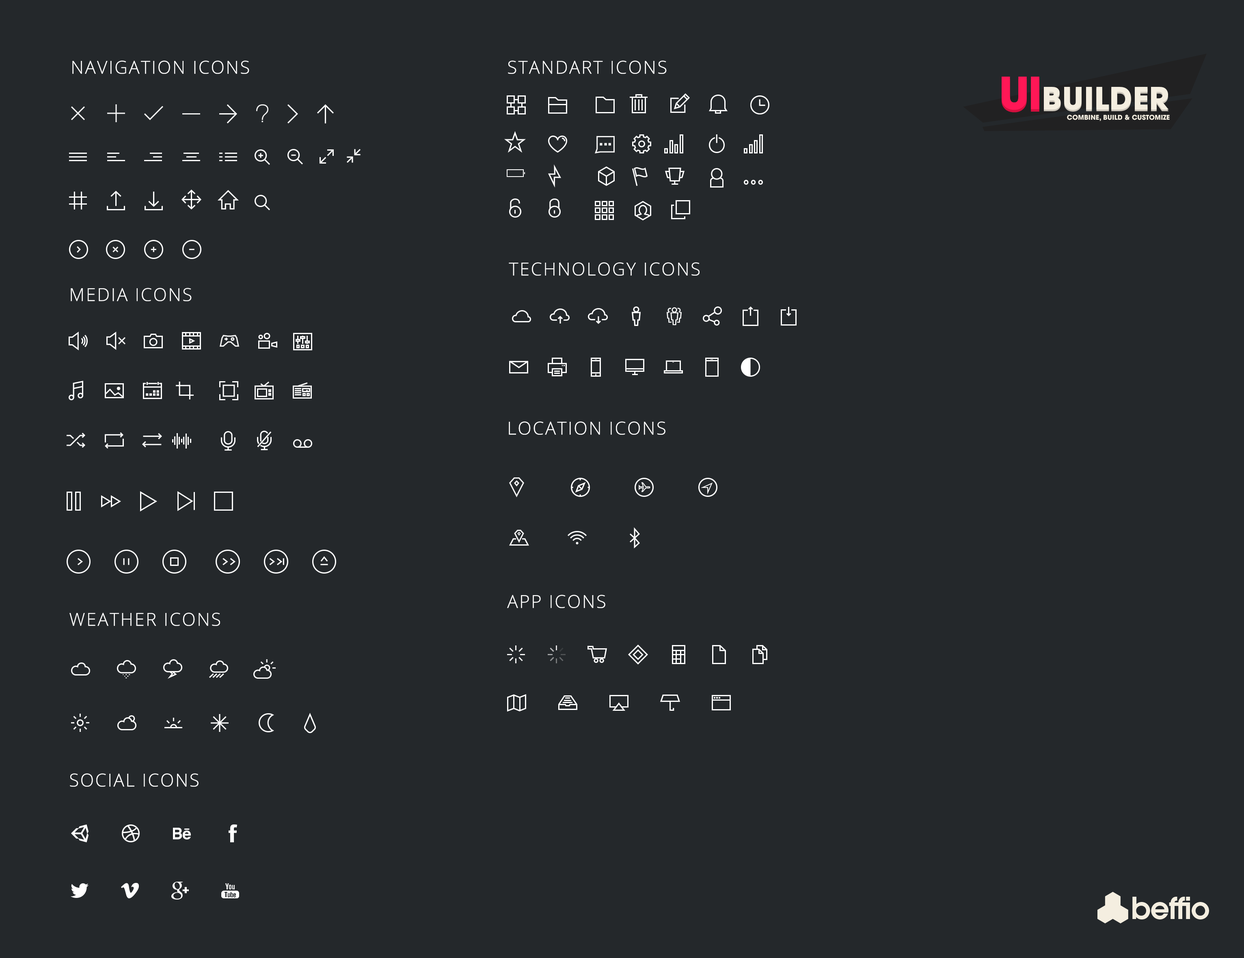
<style>
.page{position:relative;width:1244px;height:958px;background:#24282b}
.page>*{position:absolute;margin:0}
.t1{font:17.9px "OpenSans-Light";letter-spacing:0.075em;color:#ffffff;text-transform:uppercase}
</style>
<div class="page">
<p class="t1" style="left:72px;top:61px;width:177px;height:13px">Navigation icons</p>
<p class="t1" style="left:508px;top:61px;width:159px;height:13px">Standart Icons</p>
<p class="t1" style="left:509px;top:262px;width:191px;height:14px">TECHNOLOGY Icons</p>
<p class="t1" style="left:71px;top:288px;width:121px;height:13px">MEDIA ICONS</p>
<p class="t1" style="left:509px;top:422px;width:157px;height:13px">LOCATION Icons</p>
<p class="t1" style="left:507px;top:595px;width:98px;height:13px">App Icons</p>
<p class="t1" style="left:69px;top:613px;width:151px;height:13px">Weather Icons</p>
<p class="t1" style="left:70px;top:774px;width:129px;height:13px">SOCIAL Icons</p>
</div>
